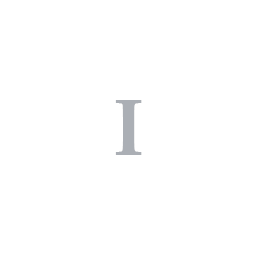
<style>
.page{position:relative;width:256px;height:256px;background:#ffffff}
.page>*{position:absolute;margin:0}
.t1{font:80px "BookAntiqua-Bold";color:#abafb5}
</style>
<div class="page">
<p class="t1" style="left:115px;top:100px;width:27px;height:55px">I</p>
</div>
